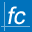
<style>
.page{position:relative;width:32px;height:32px;background:#0072bc}
.page>*{position:absolute;margin:0}
.t1{font:24px "ArialMT";color:#ffffff;font-style:italic}
</style>
<div class="page">
<p class="t1" style="left:8px;top:6px;width:18px;height:19px">fc</p>
</div>
